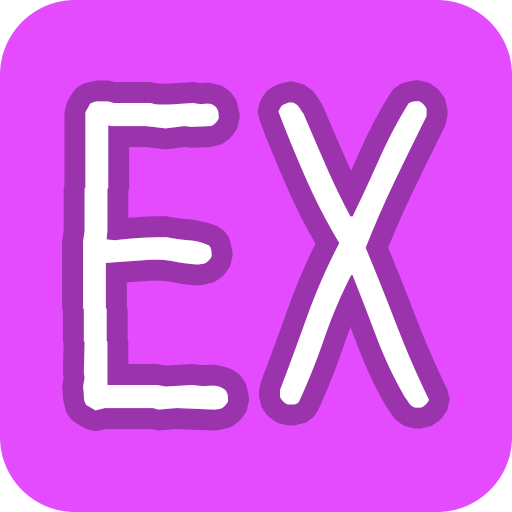
<style>
.page{position:relative;width:512px;height:512px;background:#e44bff}
.page>*{position:absolute;margin:0}
.t1{font:400px "azukifontP";color:#ffffff}
</style>
<div class="page">
<p class="t1" style="left:83px;top:101px;width:346px;height:310px">EX</p>
</div>
